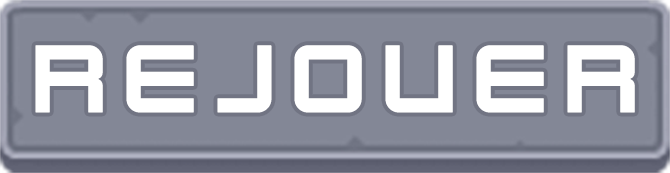
<style>
.page{position:relative;width:670px;height:173px;background:#838796}
.page>*{position:absolute;margin:0}
.t1{font:105.9px "KenVector-Future";color:#ffffff;font-weight:bold}
</style>
<div class="page">
<p class="t1" style="left:35px;top:45px;width:600px;height:68px">Rejouer</p>
</div>
